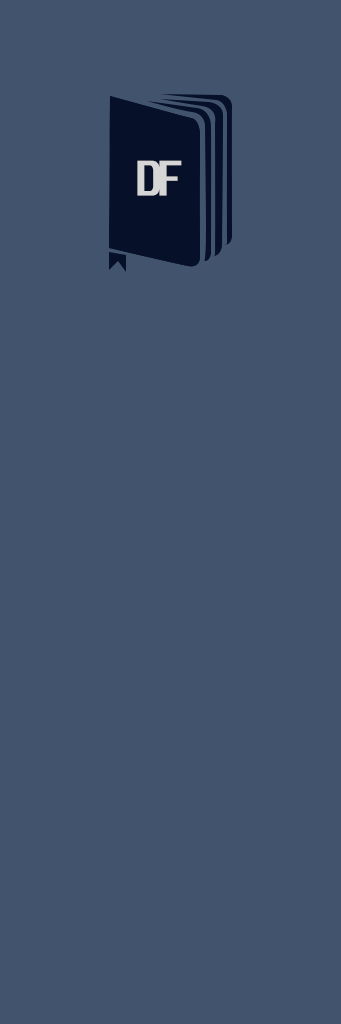
<style>
.page{position:relative;width:341px;height:1024px;background:#42546d}
.page>*{position:absolute;margin:0}
.t1{font:42.7px "Unispace-Bold";letter-spacing:-0.1em;color:#d6d6d6}
</style>
<div class="page">
<p class="t1" style="left:137px;top:160px;width:45px;height:36px">DF</p>
</div>
